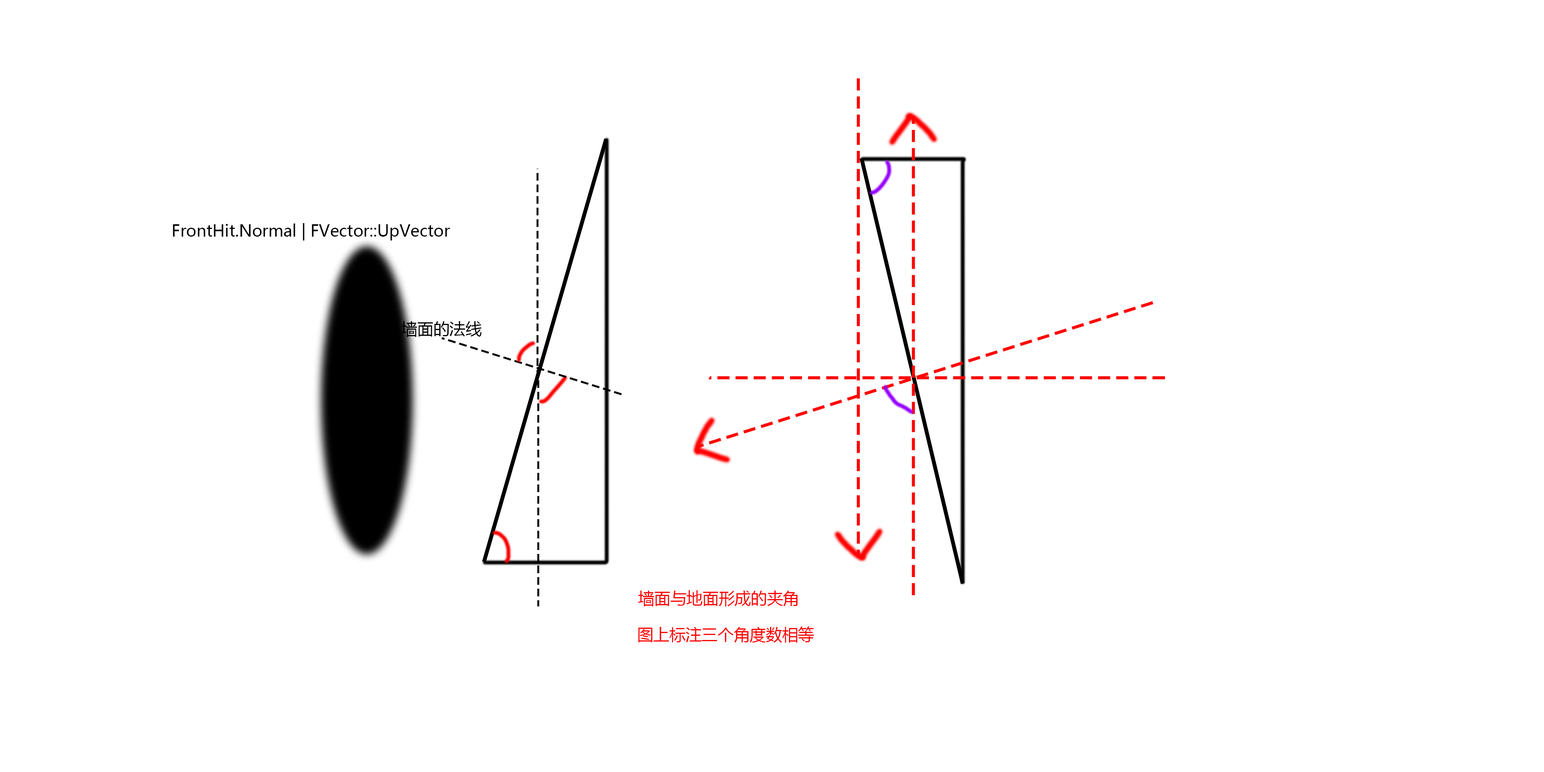
<style>
.page{position:relative;width:1544px;height:772px;background:#ffffff}
.page>*{position:absolute;margin:0}
.t1{font:16.1px "MicrosoftYaHei";color:#000000}
.t2{font:16.1px "MicrosoftYaHei";color:#ff0000}
</style>
<div class="page">
<p class="t1" style="left:173px;top:223px;width:277px;height:18px">FrontHit.Normal | FVector::UpVector</p>
<p class="t1" style="left:401px;top:321px;width:81px;height:16px">墙面的法线</p>
<p class="t2" style="left:638px;top:590px;width:160px;height:17px">墙面与地面形成的夹角</p>
<p class="t2" style="left:638px;top:627px;width:176px;height:16px">图上标注三个角度数相等</p>
</div>
